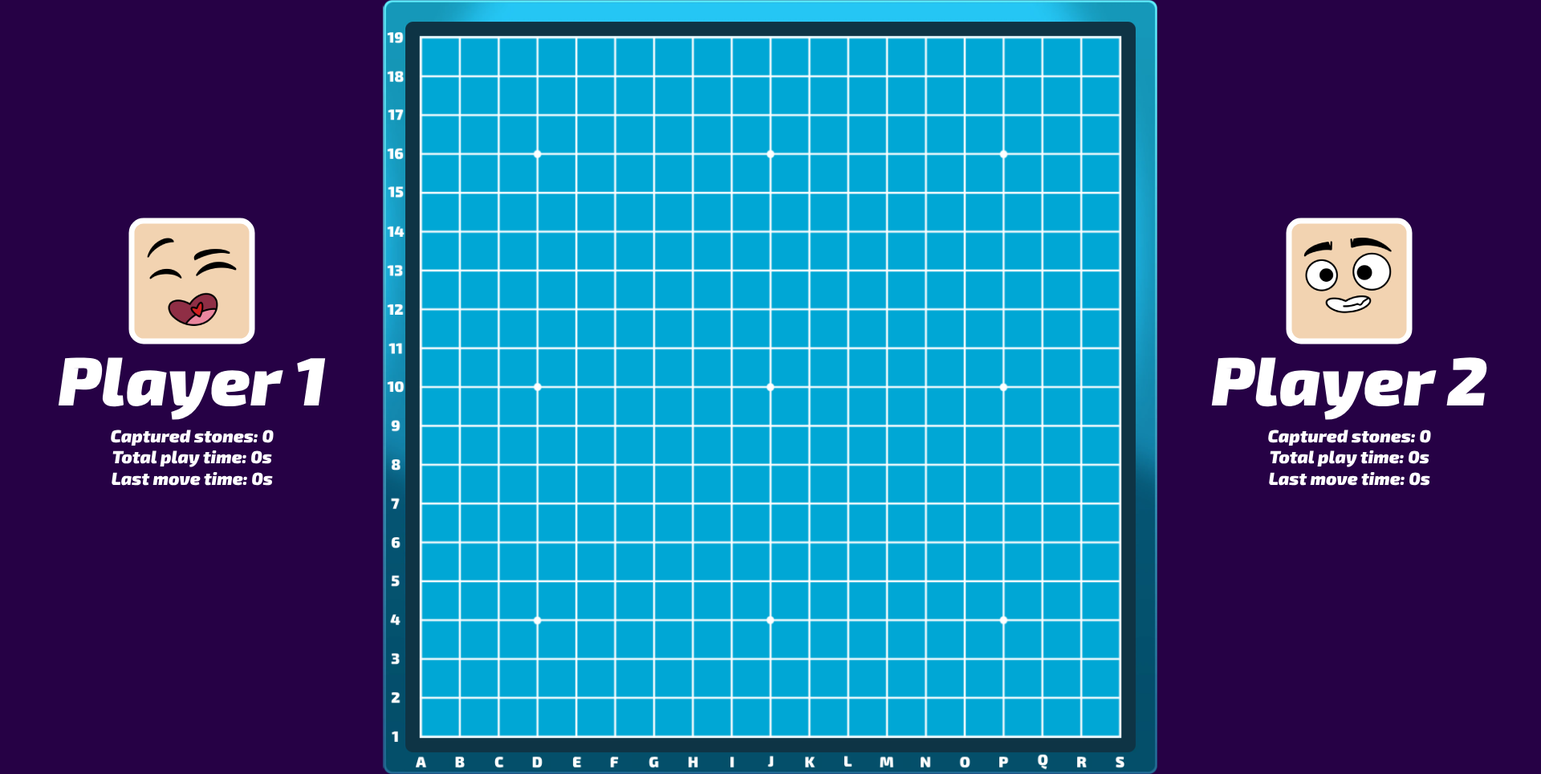
<style>
.page{position:relative;width:1541px;height:774px;background:#260145}
.page>*{position:absolute;margin:0}
.t1{font:17.7px "Exo2-BlackItalic";color:#ffffff}
.t2{font:68.2px "Exo2-BlackItalic";color:#ffffff}
</style>
<div class="page">
<p class="t1" style="left:58px;top:357px;width:268px;height:129px;text-align:center"><span class="t2">Player 1<br></span>Captured stones: 0<br>Total play time: 0s<br>Last move time: 0s</p>
<p class="t1" style="left:1211px;top:357px;width:276px;height:129px;text-align:center"><span class="t2">Player 2<br></span>Captured stones: 0<br>Total play time: 0s<br>Last move time: 0s</p>
</div>
